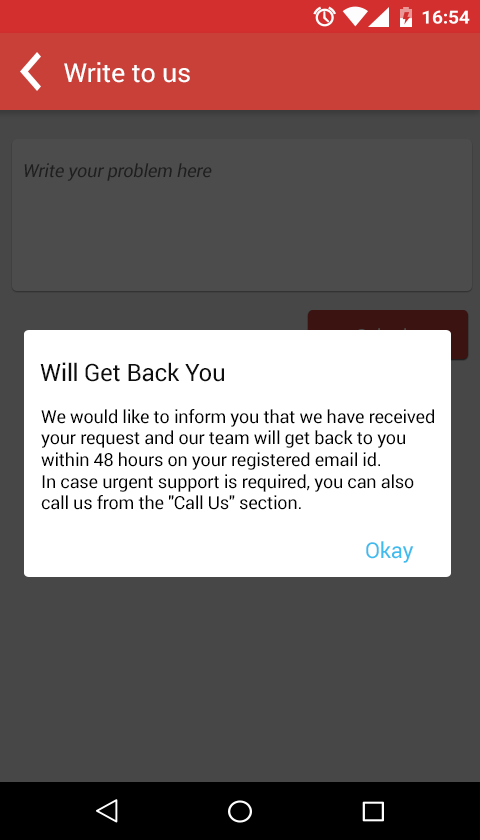
<style>
.page{position:relative;width:480px;height:840px;background:#474747}
.page>*{position:absolute;margin:0}
.t1{font:26.1px "Roboto-Regular";letter-spacing:-0.01em;color:#ffffff;scale:1.03 1}
.t2{font:18px "Roboto-Regular";letter-spacing:-0.01em;color:#6a6a6a;font-style:italic}
.t3{font:24px "Roboto-Regular";letter-spacing:-0.01em;color:#0f0f0f}
.t4{font:18px "Roboto-Regular";letter-spacing:-0.01em;color:#000000}
.t5{font:22px "Roboto-Regular";letter-spacing:-0.01em;color:#3fbcef}
</style>
<div class="page">
<p class="t1" style="left:64px;top:62px;width:126px;height:21px">Write to us</p>
<p class="t2" style="left:24px;top:163px;width:188px;height:18px">Write your problem here</p>
<p class="t3" style="left:40px;top:362px;width:184px;height:20px">Will Get Back You</p>
<p class="t4" style="left:41px;top:409px;width:393px;height:101px">We would like to inform you that we have received your request and our team will get back to you within 48 hours on your registered email id.<br>In case urgent support is required, you can also call us from the "Call Us" section.</p>
<p class="t5" style="left:366px;top:541px;width:48px;height:22px">Okay</p>
</div>
